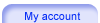
<style>
.page{position:relative;width:100px;height:23px;background:#e1e4fc}
.page>*{position:absolute;margin:0}
.t1{font:11px "ArialMT";color:#092ff6}
</style>
<div class="page">
<p class="t1" style="left:25px;top:12px;width:56px;height:11px">My account</p>
</div>
